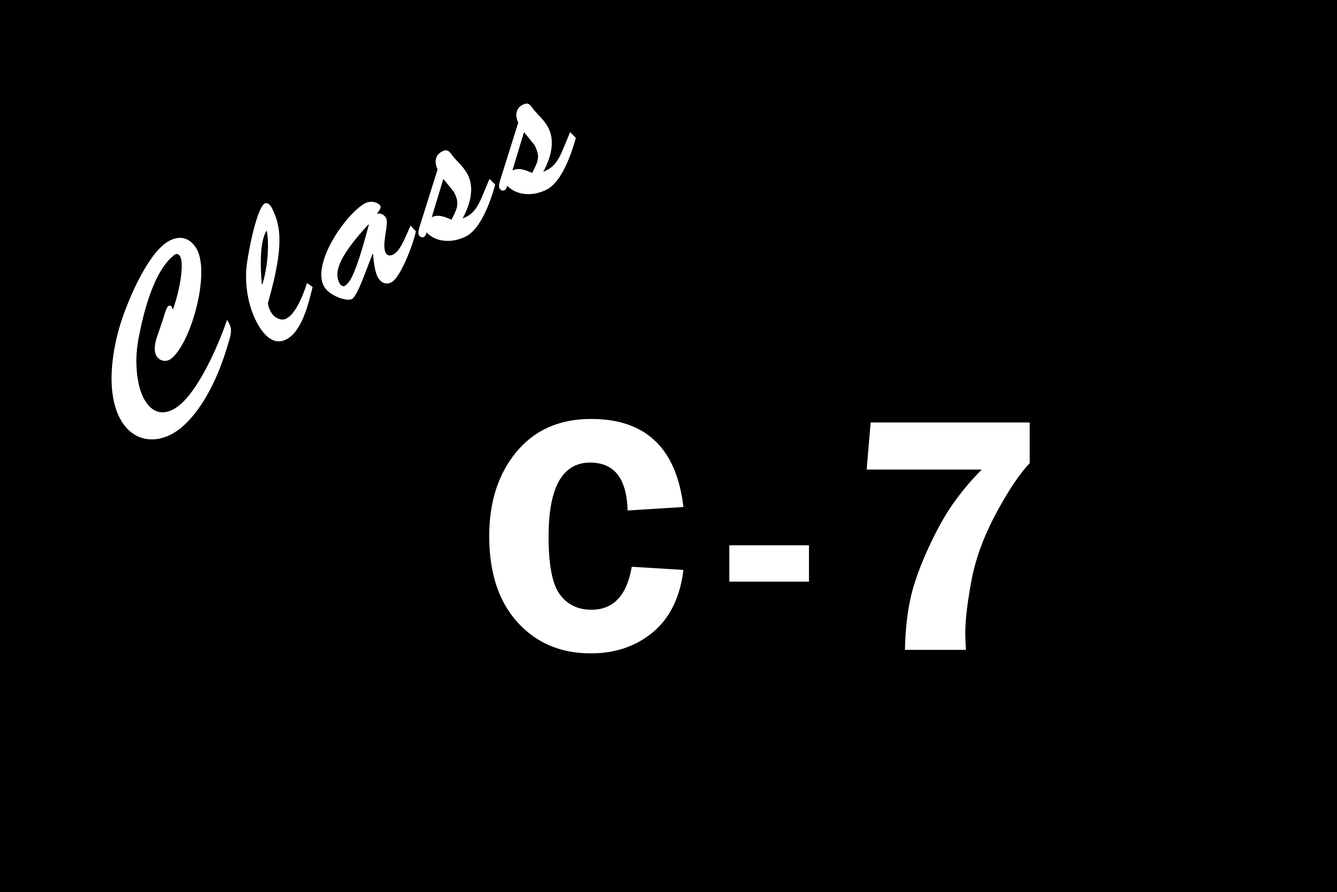
<style>
.page{position:relative;width:1337px;height:892px;background:#000000}
.page>*{position:absolute;margin:0}
.t1{font:203.7px "BrushScriptStd";letter-spacing:0.1em;color:#ffffff}
.t2{font:341.1px "FranklinGothic-Demi";letter-spacing:0.1em;color:#ffffff}
</style>
<div class="page">
<p class="t1" style="left:111px;top:103px;width:465px;height:336px;rotate:-30deg">Class</p>
<p class="t2" style="left:489px;top:419px;width:541px;height:234px">C-7</p>
</div>
